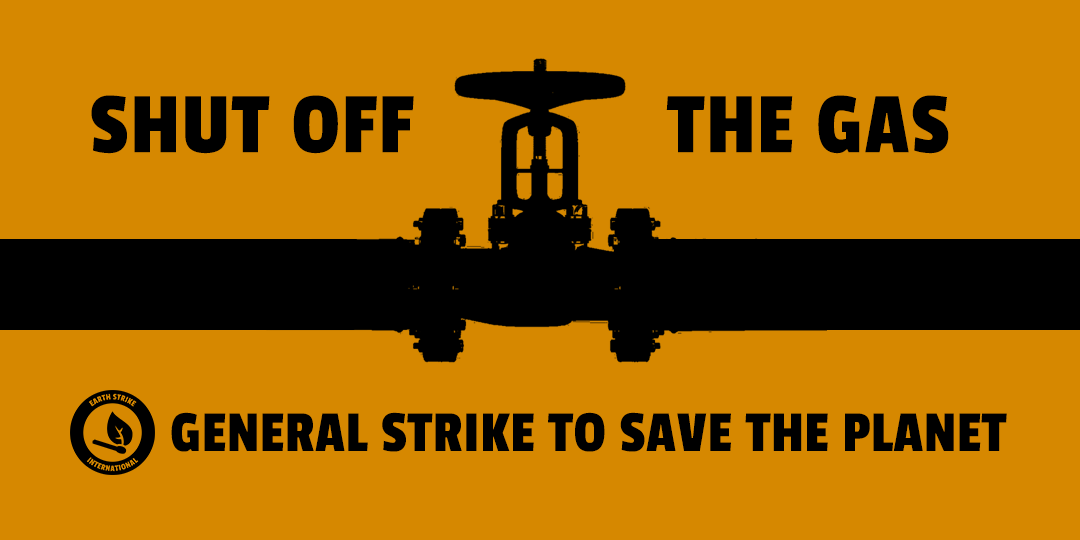
<style>
.page{position:relative;width:1080px;height:540px;background:#d68800}
.page>*{position:absolute;margin:0}
.t1{font:90px "PassionOne-Regular";letter-spacing:0.02em;color:#000000;text-transform:uppercase}
.t2{font:60.5px "PassionOne-Regular";letter-spacing:0.01em;color:#000000}
</style>
<div class="page">
<p class="t1" style="left:91px;top:95px;width:323px;height:59px">shut off</p>
<p class="t1" style="left:666px;top:95px;width:283px;height:59px">the gas</p>
<p class="t2" style="left:171px;top:412px;width:836px;height:40px">GENERAL STRIKE TO SAVE THE PLANET</p>
</div>
